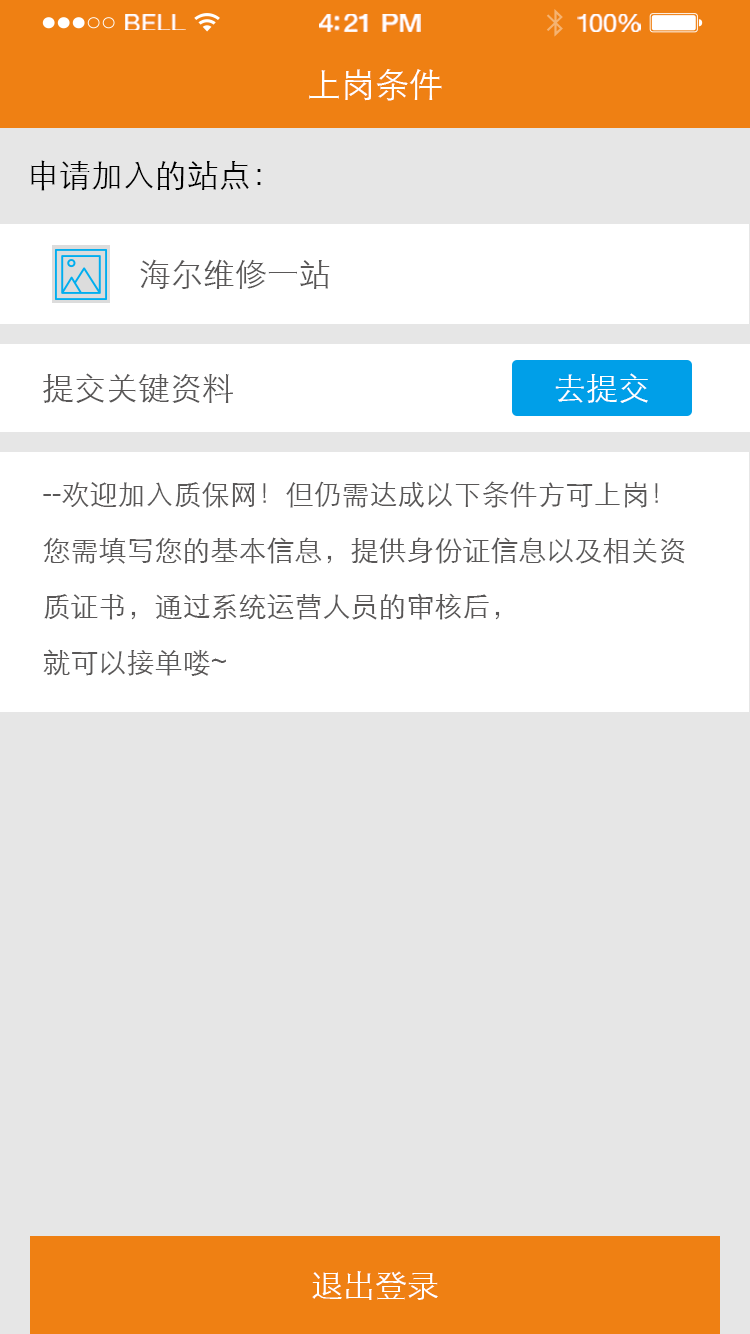
<style>
.page{position:relative;width:750px;height:1334px;background:#e6e6e6}
.page>*{position:absolute;margin:0}
.t1{font:23.3px "HelveticaNeue";letter-spacing:0.02em;color:#ffffff;scale:1.06 1}
.t2{font:25.3px "HelveticaNeue-Medium";letter-spacing:-0.02em;color:#ffffff;scale:1.06 1}
.t3{font:24.3px "HelveticaNeue";letter-spacing:-0.02em;color:#ffffff;scale:1.06 1}
.t4{font:34px "STXihei";color:#ffffff}
.t5{font:32px "STXihei";color:#000000}
.t6{font:32px "STXihei";color:#595757}
.t7{font:32px "STXihei";color:#ffffff}
.t8{font:28px/56px "STXihei";color:#595757}
</style>
<div class="page">
<p class="t1" style="left:125px;top:14px;width:61px;height:16px">BELL</p>
<p class="t2" style="left:319px;top:14px;width:102px;height:18px">4:21 PM</p>
<p class="t3" style="left:577px;top:14px;width:64px;height:18px">100%</p>
<p class="t4" style="left:309px;top:69px;width:133px;height:32px">上岗条件</p>
<p class="t5" style="left:31px;top:160px;width:230px;height:31px">申请加入的站点：</p>
<p class="t6" style="left:140px;top:259px;width:190px;height:30px">海尔维修一站</p>
<p class="t6" style="left:43px;top:373px;width:190px;height:30px">提交关键资料</p>
<p class="t7" style="left:555px;top:373px;width:93px;height:30px">去提交</p>
<p class="t8" style="left:43px;top:481px;width:642px;height:195px">--欢迎加入质保网！但仍需达成以下条件方可上岗！<br>您需填写您的基本信息，提供身份证信息以及相关资质证书，通过系统运营人员的审核后，<br>就可以接单喽~</p>
<p class="t7" style="left:312px;top:1271px;width:126px;height:29px">退出登录</p>
</div>
